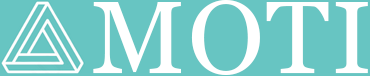
<style>
.page{position:relative;width:370px;height:76px;background:#67c5c2}
.page>*{position:absolute;margin:0}
.t1{font:102px "Georgia";letter-spacing:0.025em;color:#ffffff}
</style>
<div class="page">
<p class="t1" style="left:93px;top:0px;width:275px;height:75px">MOTI</p>
</div>
